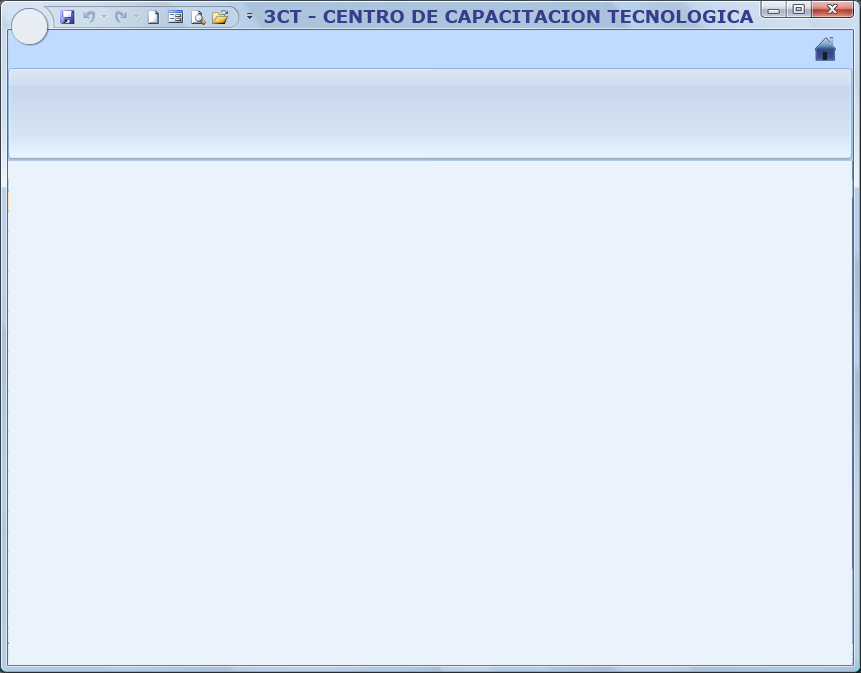
<style>
.page{position:relative;width:861px;height:673px;background:#eaf2fb}
.page>*{position:absolute;margin:0}
.t1{font:18px "Verdana-Bold";color:#383c8a}
</style>
<div class="page">
<p class="t1" style="left:264px;top:10px;width:490px;height:13px">3CT - CENTRO DE CAPACITACION TECNOLOGICA</p>
</div>
